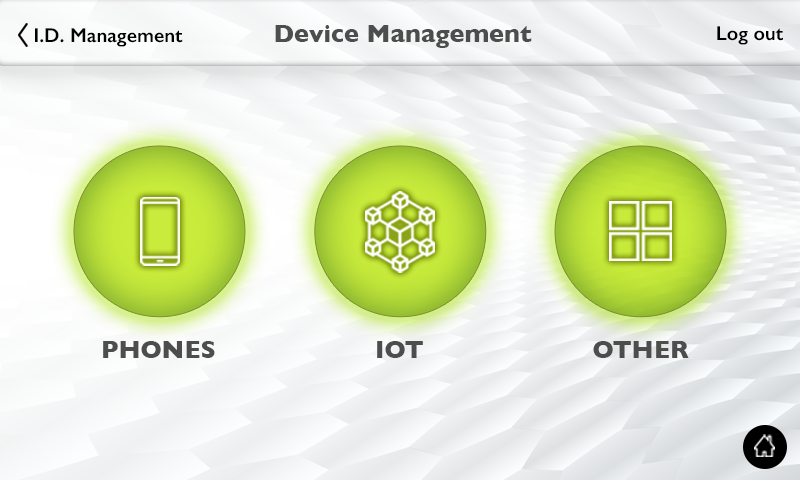
<style>
.page{position:relative;width:800px;height:480px}
.page>*{position:absolute;margin:0}
.t1{font:20px "GillSans-SemiBold";color:#000000}
.t2{font:25px "GillSans-Bold";color:#4d4d4d}
.t3{font:25.1px "GillSans-Bold";color:#4d4d4d;text-transform:uppercase}
</style>
<div class="page">
<p class="t1" style="left:35px;top:28px;width:148px;height:19px">I.D. Management</p>
<p class="t2" style="left:275px;top:25px;width:257px;height:23px">Device Management</p>
<p class="t1" style="left:717px;top:26px;width:66px;height:19px">Log out</p>
<p class="t3" style="left:103px;top:341px;width:112px;height:17px">Phones</p>
<p class="t3" style="left:377px;top:341px;width:46px;height:17px">Iot</p>
<p class="t3" style="left:593px;top:341px;width:96px;height:17px">Other</p>
</div>
